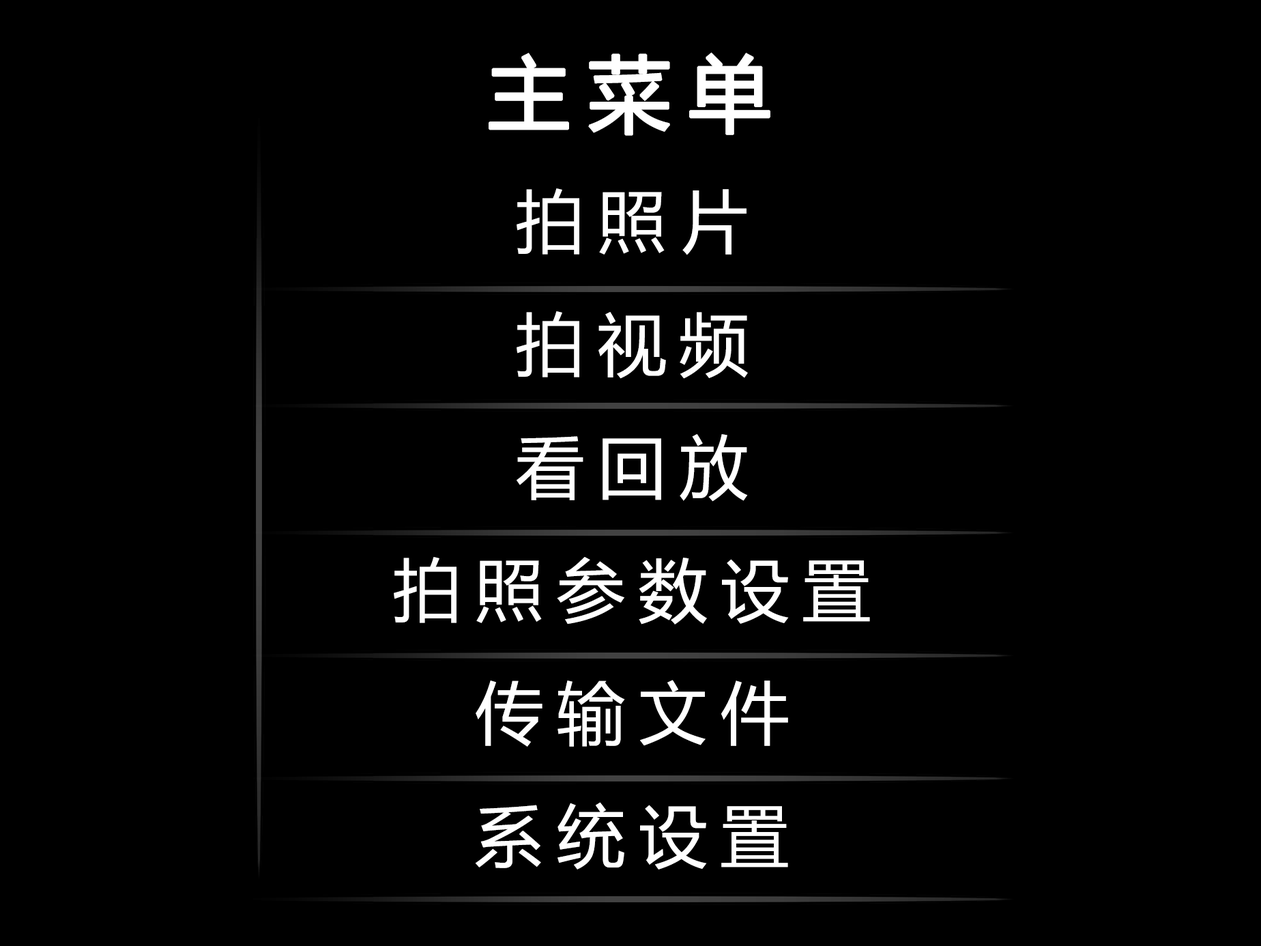
<style>
.page{position:relative;width:1261px;height:946px;background:#000000}
.page>*{position:absolute;margin:0}
.t1{font:81.9px "MicrosoftYaHei";letter-spacing:0.2em;color:#ffffff;font-weight:bold}
.t2{font:68.2px/122.8px "MicrosoftYaHei";letter-spacing:0.2em;color:#ffffff}
</style>
<div class="page">
<p class="t1" style="left:489px;top:53px;width:281px;height:83px">主菜单</p>
<p class="t2" style="left:394px;top:188px;width:476px;height:681px;text-align:center">拍照片<br>拍视频<br>看回放<br>拍照参数设置<br>传输文件<br>系统设置</p>
</div>
